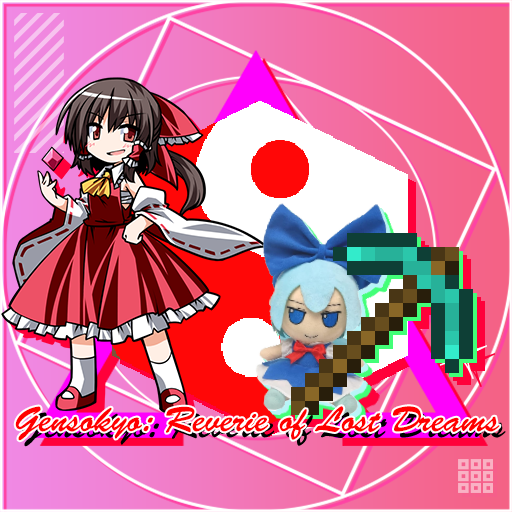
<style>
.page{position:relative;width:512px;height:512px}
.page>*{position:absolute;margin:0}
.t1{font:35.4px "BrushScriptStd";color:#000000}
</style>
<div class="page">
<p class="t1" style="left:15px;top:406px;width:485px;height:35px">Gensokyo: Reverie of Lost Dreams</p>
</div>
